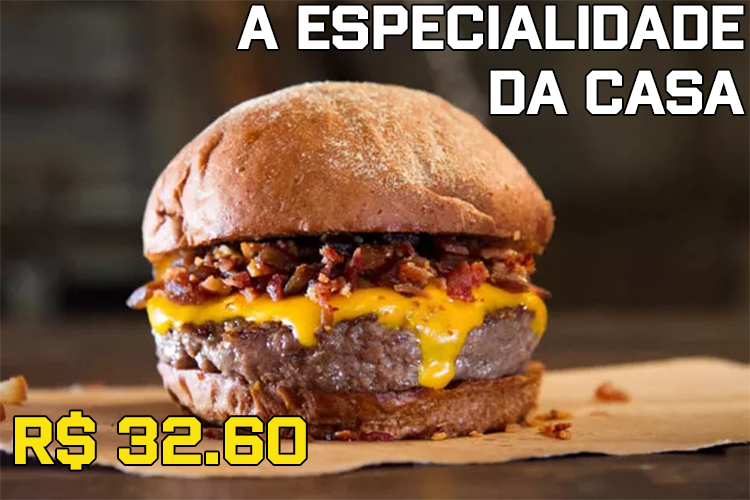
<style>
.page{position:relative;width:750px;height:500px}
.page>*{position:absolute;margin:0}
.t1{font:54.2px "WinnerSans-Bold";color:#ffffff}
.t2{font:58.3px "WinnerSans-Bold";color:#fae311}
</style>
<div class="page">
<p class="t1" style="left:237px;top:5px;width:508px;height:109px;text-align:right">a especialidade<br>da casa</p>
<p class="t2" style="left:15px;top:411px;width:291px;height:59px">R$ 32.60</p>
</div>
